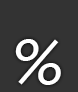
<style>
.page{position:relative;width:78px;height:92px;background:#333333}
.page>*{position:absolute;margin:0}
.t1{font:64.7px "ProductSans-Italic";color:#ffffff}
</style>
<div class="page">
<p class="t1" style="left:15px;top:39px;width:46px;height:46px">%</p>
</div>
